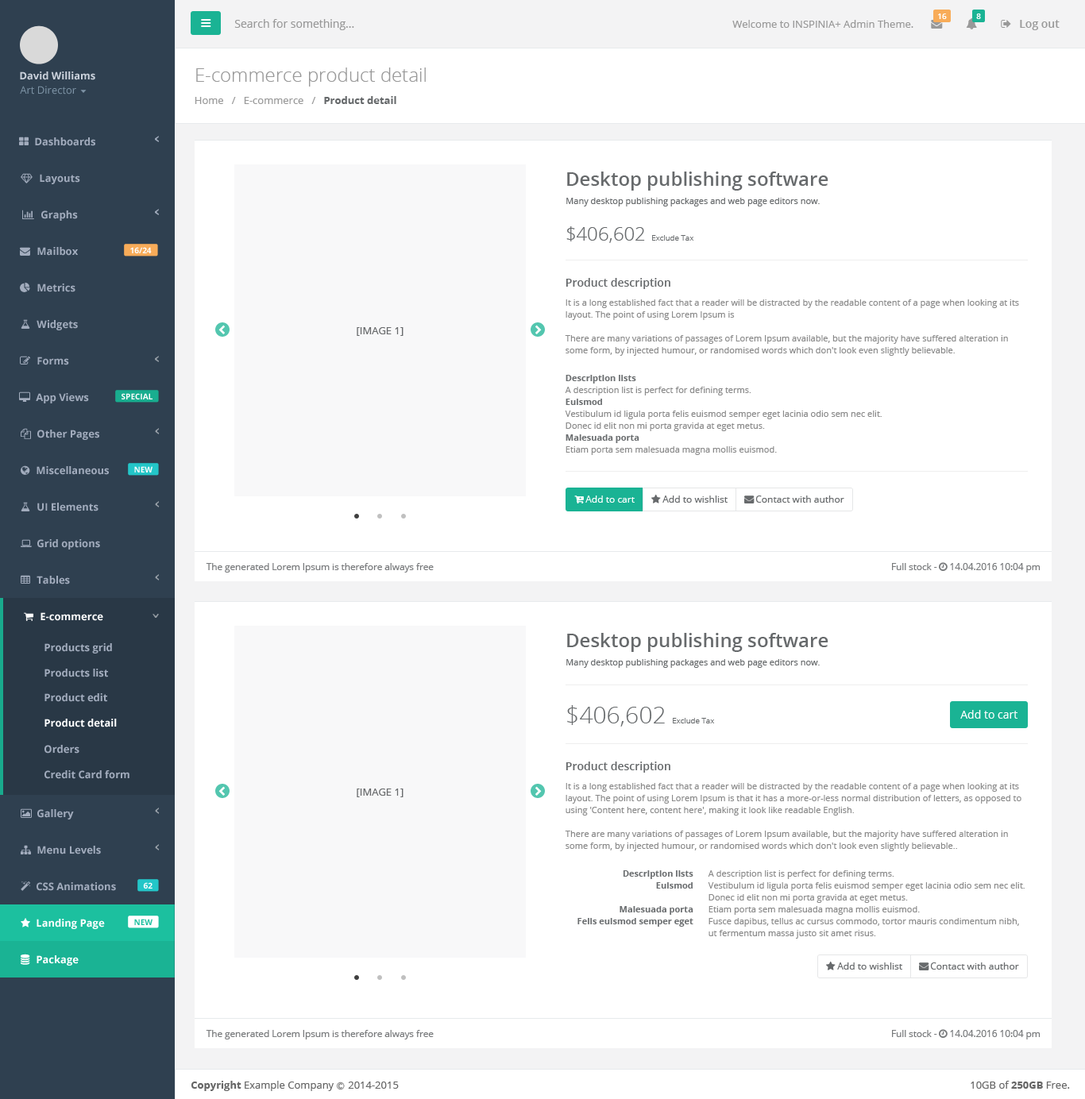
<style>
.page{position:relative;width:1085px;height:1099px;background:#ffffff}
.page>*{position:absolute;margin:0}
.t1{font:7.9px "OpenSans-Semibold";color:#ffffff}
.t2{font:11.1px "OpenSans";color:#999999}
.t3{font:10.3px "OpenSans";color:#999999}
.t4{font:11.1px "OpenSans-Semibold";color:#999999}
.t5{font:10.3px "OpenSans-Bold";color:#cad1db}
.t6{font:19.1px "OpenSans-Light";color:#999999}
.t7{font:10.3px "OpenSans";color:#7d93a5}
.t8{font:10.3px "OpenSans-Bold";color:#676a6c}
.t9{font:10.3px "OpenSans-Bold";color:#a2acbd}
.t10{font:19.1px "OpenSans-Semibold";color:#676a6c}
.t11{font:8.7px "OpenSans";color:#676a6c}
.t12{font:19.1px "OpenSans-Light";color:#676a6c}
.t13{font:7.9px "OpenSans-Light";color:#676a6c}
.t14{font:7.9px "OpenSans-Bold";color:#fefefe}
.t15{font:11.1px "OpenSans-Semibold";color:#676a6c}
.t16{font:8.7px/11.9px "OpenSans";letter-spacing:0.002em;color:#8a8a8a}
.t17{font:10.3px "OpenSans";color:#676a6c}
.t18{font:8.7px/11.9px "OpenSans-Bold";letter-spacing:0.002em;color:#6a6d6f}
.t19{font:9.5px "OpenSans";letter-spacing:0.002em;color:#ffffff}
.t20{font:9.5px "OpenSans";letter-spacing:0.002em;color:#676a6c}
.t21{font:9.5px "OpenSans";letter-spacing:-0.011em;color:#787a7c}
.t22{font:10.3px "OpenSans-Bold";color:#ffffff}
.t23{font:23.8px "OpenSans-Light";color:#676a6c}
.t24{font:11.1px "OpenSans";letter-spacing:0.002em;color:#ffffff}
.t25{font:8.7px "OpenSans-Bold";letter-spacing:0.002em;color:#6a6d6f}
.t26{font:8.7px "OpenSans";letter-spacing:0.002em;color:#8a8a8a}
.t27{font:7.9px "OpenSans-Bold";color:#1cc09f}
.t28{font:10.3px "OpenSans";color:#666666}
.t29{font:10.3px "OpenSans-Bold";color:#666666}
.t30{font:7.9px "Meiryo";color:#666666}
</style>
<div class="page">
<p class="t1" style="left:938px;top:14px;width:9px;height:5px">16</p>
<p class="t1" style="left:976px;top:14px;width:5px;height:5px">8</p>
<p class="t2" style="left:234px;top:19px;width:120px;height:11px">Search for something...</p>
<p class="t3" style="left:732px;top:20px;width:181px;height:8px">Welcome to INSPINIA+ Admin Theme.</p>
<p class="t4" style="left:1020px;top:20px;width:39px;height:10px">Log out</p>
<p class="t5" style="left:20px;top:71px;width:75px;height:9px">David Williams</p>
<p class="t6" style="left:196px;top:68px;width:230px;height:19px">E-commerce product detail</p>
<p class="t7" style="left:20px;top:86px;width:56px;height:9px">Art Director</p>
<p class="t3" style="left:195px;top:96px;width:201px;height:8px">Home   /   E-commerce   /   <span class="t8">Product detail</span></p>
<p class="t9" style="left:35px;top:137px;width:60px;height:9px">Dashboards</p>
<p class="t9" style="left:40px;top:174px;width:40px;height:10px">Layouts</p>
<p class="t10" style="left:567px;top:172px;width:261px;height:19px">Desktop publishing software</p>
<p class="t11" style="left:566px;top:198px;width:254px;height:8px">Many desktop publishing packages and web page editors now.</p>
<p class="t9" style="left:41px;top:210px;width:37px;height:11px">Graphs</p>
<p class="t12" style="left:566px;top:226px;width:79px;height:17px">$406,602</p>
<p class="t13" style="left:652px;top:235px;width:41px;height:6px">Exclude Tax</p>
<p class="t9" style="left:37px;top:247px;width:41px;height:9px">Mailbox</p>
<p class="t14" style="left:130px;top:247px;width:22px;height:6px">16/24</p>
<p class="t15" style="left:565px;top:278px;width:105px;height:11px">Product description</p>
<p class="t9" style="left:37px;top:284px;width:38px;height:8px">Metrics</p>
<p class="t16" style="left:565px;top:299px;width:454px;height:57px">It is a long established fact that a reader will be distracted by the readable content of a page when looking at its layout. The point of using Lorem Ipsum is <br><br>There are many variations of passages of Lorem Ipsum available, but the majority have suffered alteration in some form, by injected humour, or randomised words which don't look even slightly believable.</p>
<p class="t9" style="left:37px;top:320px;width:41px;height:10px">Widgets</p>
<p class="t17" style="left:357px;top:327px;width:46px;height:9px">[IMAGE 1]</p>
<p class="t9" style="left:37px;top:357px;width:32px;height:8px">Forms</p>
<p class="t16" style="left:565px;top:375px;width:317px;height:80px"><span class="t18">Description lists<br></span>A description list is perfect for defining terms.<br><span class="t18">Euismod<br></span>Vestibulum id ligula porta felis euismod semper eget lacinia odio sem nec elit.<br>Donec id elit non mi porta gravida at eget metus.<br><span class="t18">Malesuada porta<br></span>Etiam porta sem malesuada magna mollis euismod.</p>
<p class="t9" style="left:36px;top:393px;width:53px;height:10px">App Views</p>
<p class="t14" style="left:122px;top:393px;width:30px;height:6px">SPECIAL</p>
<p class="t9" style="left:37px;top:430px;width:62px;height:10px">Other Pages</p>
<p class="t9" style="left:37px;top:466px;width:72px;height:9px">Miscellaneous</p>
<p class="t14" style="left:134px;top:466px;width:18px;height:7px">NEW</p>
<p class="t19" style="left:585px;top:496px;width:50px;height:7px">Add to cart</p>
<p class="t20" style="left:662px;top:496px;width:65px;height:7px">Add to wishlist</p>
<p class="t20" style="left:755px;top:496px;width:89px;height:7px">Contact with author</p>
<p class="t9" style="left:37px;top:503px;width:61px;height:8px">UI Elements</p>
<p class="t9" style="left:37px;top:539px;width:63px;height:11px">Grid options</p>
<p class="t21" style="left:206px;top:563px;width:228px;height:10px">The generated Lorem Ipsum is therefore always free</p>
<p class="t9" style="left:37px;top:576px;width:33px;height:9px">Tables</p>
<p class="t22" style="left:41px;top:612px;width:62px;height:9px">E-commerce</p>
<p class="t10" style="left:567px;top:633px;width:261px;height:19px">Desktop publishing software</p>
<p class="t9" style="left:44px;top:643px;width:68px;height:11px">Products grid</p>
<p class="t11" style="left:566px;top:659px;width:254px;height:9px">Many desktop publishing packages and web page editors now.</p>
<p class="t9" style="left:44px;top:669px;width:64px;height:8px">Products list</p>
<p class="t9" style="left:44px;top:693px;width:63px;height:9px">Product edit</p>
<p class="t23" style="left:567px;top:705px;width:98px;height:22px">$406,602</p>
<p class="t24" style="left:960px;top:710px;width:57px;height:9px">Add to cart</p>
<p class="t22" style="left:44px;top:719px;width:73px;height:8px">Product detail</p>
<p class="t13" style="left:673px;top:718px;width:41px;height:6px">Exclude Tax</p>
<p class="t9" style="left:44px;top:745px;width:35px;height:9px">Orders</p>
<p class="t15" style="left:565px;top:762px;width:105px;height:11px">Product description</p>
<p class="t9" style="left:44px;top:770px;width:85px;height:9px">Credit Card form</p>
<p class="t16" style="left:565px;top:783px;width:456px;height:68px">It is a long established fact that a reader will be distracted by the readable content of a page when looking at its layout. The point of using Lorem Ipsum is that it has a more-or-less normal distribution of letters, as opposed to using 'Content here, content here', making it look like readable English. <br><br>There are many variations of passages of Lorem Ipsum available, but the majority have suffered alteration in some form, by injected humour, or randomised words which don't look even slightly believable..</p>
<p class="t17" style="left:357px;top:789px;width:46px;height:8px">[IMAGE 1]</p>
<p class="t9" style="left:37px;top:809px;width:37px;height:11px">Gallery</p>
<p class="t9" style="left:37px;top:846px;width:64px;height:9px">Menu Levels</p>
<p class="t25" style="left:623px;top:870px;width:70px;height:9px">Description lists</p>
<p class="t26" style="left:708px;top:870px;width:186px;height:9px">A description list is perfect for defining terms.</p>
<p class="t9" style="left:37px;top:882px;width:79px;height:9px">CSS Animations</p>
<p class="t14" style="left:143px;top:882px;width:9px;height:7px">62</p>
<p class="t25" style="left:656px;top:882px;width:37px;height:7px">Euismod</p>
<p class="t16" style="left:708px;top:882px;width:317px;height:21px">Vestibulum id ligula porta felis euismod semper eget lacinia odio sem nec elit.<br>Donec id elit non mi porta gravida at eget metus.</p>
<p class="t25" style="left:619px;top:906px;width:74px;height:9px">Malesuada porta</p>
<p class="t26" style="left:708px;top:906px;width:212px;height:9px">Etiam porta sem malesuada magna mollis euismod.</p>
<p class="t22" style="left:37px;top:919px;width:68px;height:10px">Landing Page</p>
<p class="t27" style="left:134px;top:919px;width:18px;height:6px">NEW</p>
<p class="t25" style="left:577px;top:918px;width:116px;height:9px">Felis euismod semper eget</p>
<p class="t16" style="left:708px;top:918px;width:311px;height:21px">Fusce dapibus, tellus ac cursus commodo, tortor mauris condimentum nibh, ut fermentum massa justo sit amet risus.</p>
<p class="t22" style="left:37px;top:955px;width:42px;height:11px">Package</p>
<p class="t20" style="left:837px;top:963px;width:65px;height:7px">Add to wishlist</p>
<p class="t20" style="left:930px;top:963px;width:89px;height:7px">Contact with author</p>
<p class="t21" style="left:206px;top:1030px;width:228px;height:10px">The generated Lorem Ipsum is therefore always free</p>
<p class="t28" style="left:191px;top:1081px;width:208px;height:10px"><span class="t29">Copyright</span> Example Company <span class="t30">Ⓒ </span>2014-2015</p>
<p class="t28" style="left:970px;top:1081px;width:100px;height:8px">10GB of <span class="t29">250GB</span> Free.</p>
</div>
